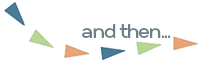
<style>
.page{position:relative;width:200px;height:62px;background:#ffffff}
.page>*{position:absolute;margin:0}
.t1{font:20.1px "Gabriel-Sans-Medium";letter-spacing:-0.075em;color:#6b7f86}
</style>
<div class="page">
<p class="t1" style="left:82px;top:24px;width:89px;height:14px">and then...</p>
</div>
